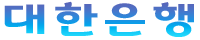
<style>
.page{position:relative;width:200px;height:40px;background:#ffffff}
.page>*{position:absolute;margin:0}
.t1{font:36.7px "GyeonggiTitleV";scale:1.36 1}
</style>
<div class="page">
<p class="t1" style="left:4px;top:1px;width:190px;height:36px">대한은행</p>
</div>
